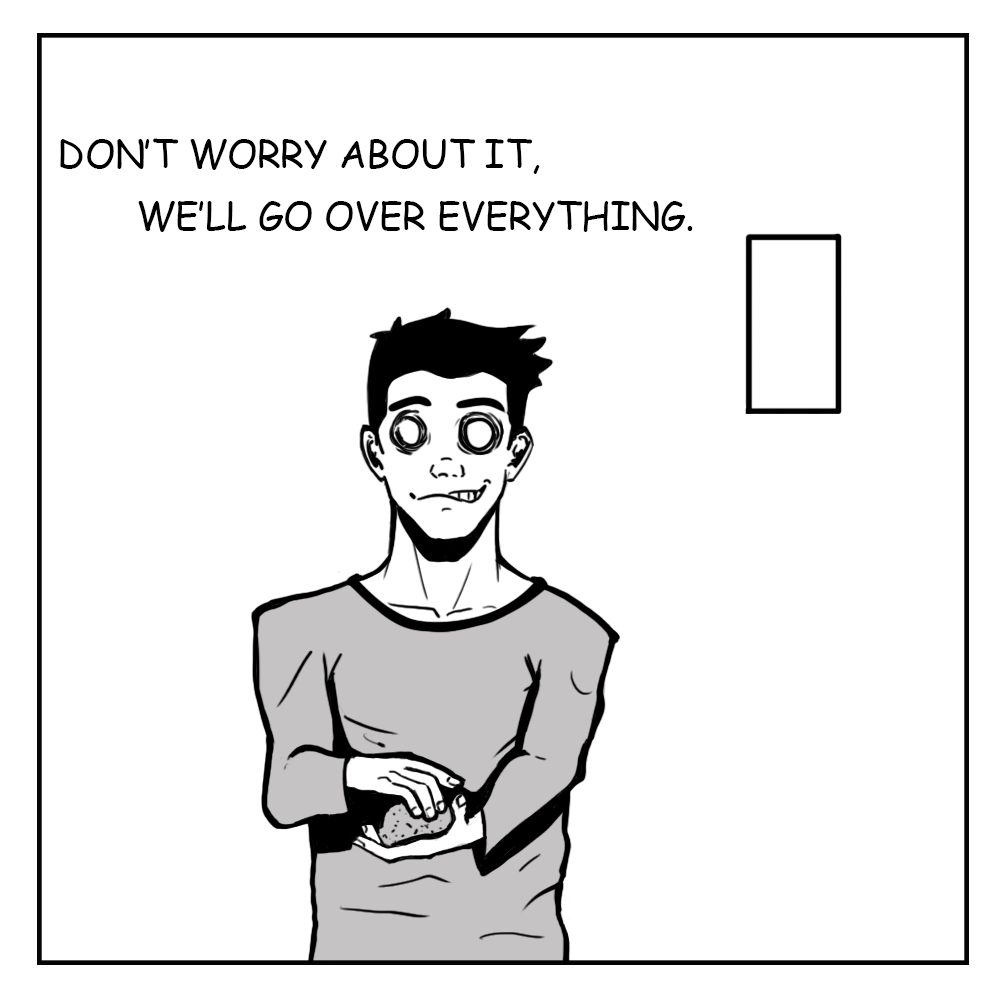
<style>
.page{position:relative;width:1000px;height:1000px;background:#ffffff}
.page>*{position:absolute;margin:0}
.t1{font:37.5px/62.5px "ComicSansMS";color:#000000;text-transform:uppercase}
</style>
<div class="page">
<p class="t1" style="left:60px;top:138px;width:633px;height:94px">Don’t worry about it,<br>       We’ll go over everything.</p>
</div>
